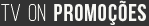
<style>
.page{position:relative;width:149px;height:26px;background:#333333}
.page>*{position:absolute;margin:0}
.t1{font:24px "BebasNeueBold";letter-spacing:0.028em;color:#f8f8f4}
.t2{font:24px "BebasNeueLight";color:#f8f8f4}
</style>
<div class="page">
<p class="t1" style="left:1px;top:0px;width:145px;height:25px"><span class="t2">TV  ON  </span>PROMOÇÕES</p>
</div>
